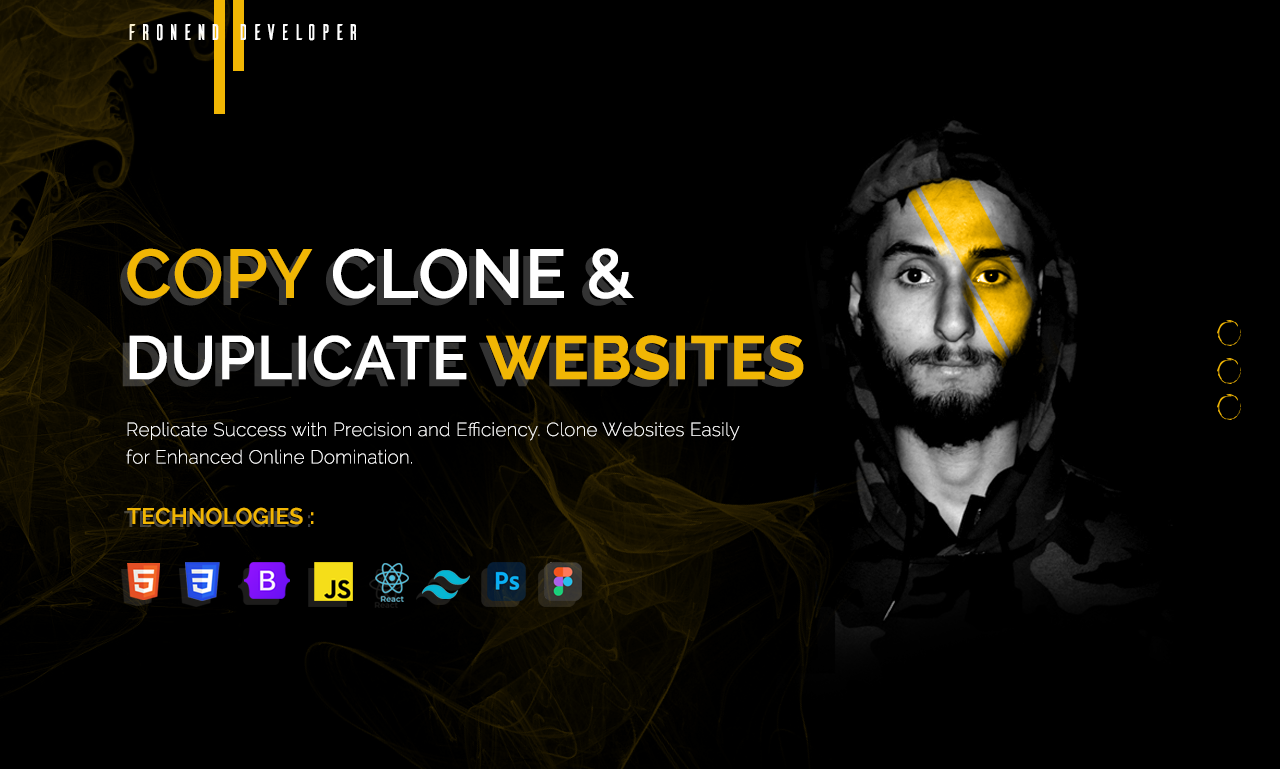
<style>
.page{position:relative;width:1280px;height:769px;background:#000000}
.page>*{position:absolute;margin:0}
.t1{font:22.5px "Ailerons-Regular";letter-spacing:0.02em;color:#fefefe}
.t2{font:61.2px/81.2px "Raleway-SemiBold";letter-spacing:0.02em;color:#ffffff}
.t3{font:68.8px/81.2px "Raleway-SemiBold";letter-spacing:0.02em;color:#f1b604}
.t4{font:68.8px/81.2px "Raleway-SemiBold";letter-spacing:0.02em;color:#ffffff}
.t5{font:61.2px/81.2px "Raleway-Bold";letter-spacing:0.02em;color:#f1b604}
.t6{font:18.8px/27.5px "Raleway-ExtraLight";letter-spacing:0.016em;color:#fefefe}
.t7{font:22.5px "Raleway-SemiBold";letter-spacing:0.016em;color:#f1b604}
</style>
<div class="page">
<p class="t1" style="left:129px;top:24px;width:227px;height:17px">FRONEND DEVELOPER</p>
<p class="t2" style="left:127px;top:248px;width:677px;height:132px"><span class="t3">COPY </span><span class="t4">CLONE &amp;<br></span>DUPLICATE <span class="t5">WEBSITES</span></p>
<p class="t6" style="left:126px;top:422px;width:614px;height:42px">Replicate Success with Precision and Efficiency. Clone Websites Easily<br>for Enhanced Online Domination.</p>
<p class="t7" style="left:127px;top:507px;width:187px;height:18px">TECHNOLOGIES :</p>
</div>
